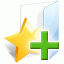
<style>
.page{position:relative;width:64px;height:64px;background:#fcfefc}
.page>*{position:absolute;margin:0}
.t1{font:60px "Arial-BoldMT"}
</style>
<div class="page">
<p class="t1" style="left:30px;top:31px;width:29px;height:29px">+</p>
</div>
